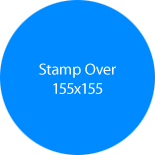
<style>
.page{position:relative;width:155px;height:155px;background:#008aff}
.page>*{position:absolute;margin:0}
.t1{font:16px "MyriadPro-Regular";color:#ffffff}
</style>
<div class="page">
<p class="t1" style="left:39px;top:63px;width:77px;height:31px;text-align:center">Stamp Over<br>155x155</p>
</div>
